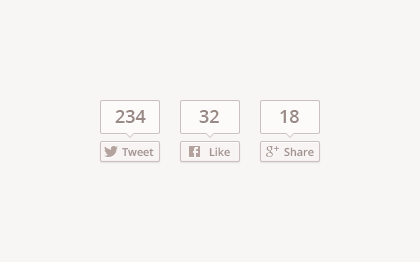
<style>
.page{position:relative;width:420px;height:262px;background:#f7f6f5}
.page>*{position:absolute;margin:0}
.t1{font:18px "OpenSans-Semibold";color:#998a86}
.t2{font:11px "OpenSans-Semibold";color:#a39390}
</style>
<div class="page">
<p class="t1" style="left:115px;top:110px;width:31px;height:13px">234</p>
<p class="t1" style="left:199px;top:110px;width:20px;height:13px">32</p>
<p class="t1" style="left:280px;top:110px;width:19px;height:13px">18</p>
<p class="t2" style="left:122px;top:148px;width:32px;height:9px">Tweet</p>
<p class="t2" style="left:209px;top:147px;width:21px;height:10px">Like</p>
<p class="t2" style="left:284px;top:147px;width:30px;height:10px">Share</p>
</div>
